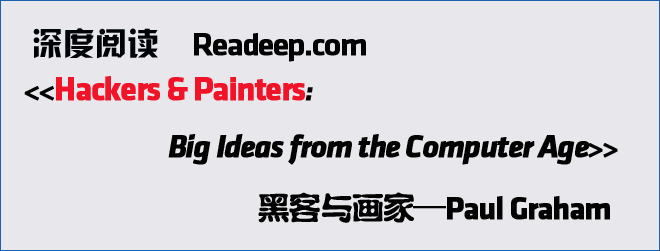
<style>
.page{position:relative;width:660px;height:251px;background:#e8e7eb}
.page>*{position:absolute;margin:0}
.t1{font:32px "HYk2gj";color:#000307}
.t2{font:32px "KlavikaMedium-OSF";letter-spacing:-0.05em;color:#020202;font-weight:bold}
.t3{font:32px "KlavikaBold-BoldItalicOSF";letter-spacing:-0.05em;color:#020202;font-weight:bold}
.t4{font:28px "KlavikaBold-BoldItalicOSF";letter-spacing:-0.05em;color:#020202;font-weight:bold}
.t5{font:33.3px "KlavikaBold-BoldOSTF";letter-spacing:-0.05em;color:#f11328;font-weight:bold}
.t6{font:32px "KlavikaBold-BoldOSTF";letter-spacing:-0.05em;color:#020202;font-weight:bold}
.t7{font:32px "FZSZJW--GB1-0";letter-spacing:-0.05em;color:#020202;font-weight:bold}
.t8{font:32px "AdobeHeitiStd-Regular";letter-spacing:-0.05em;color:#020202;font-weight:bold}
</style>
<div class="page">
<p class="t1" style="left:33px;top:28px;width:125px;height:31px">深度阅读</p>
<p class="t2" style="left:194px;top:33px;width:172px;height:29px">Readeep.com</p>
<p class="t3" style="left:24px;top:76px;width:594px;height:89px"><span class="t4">&lt;&lt;</span><span class="t5">Hackers &amp; Painters</span><span class="t4">: <br>                                </span>Big Ideas from the Computer Age<span class="t4">&gt;&gt;</span></p>
<p class="t6" style="left:258px;top:192px;width:352px;height:31px"><span class="t7">黑客与画家</span><span class="t8">—</span>Paul Graham</p>
</div>
